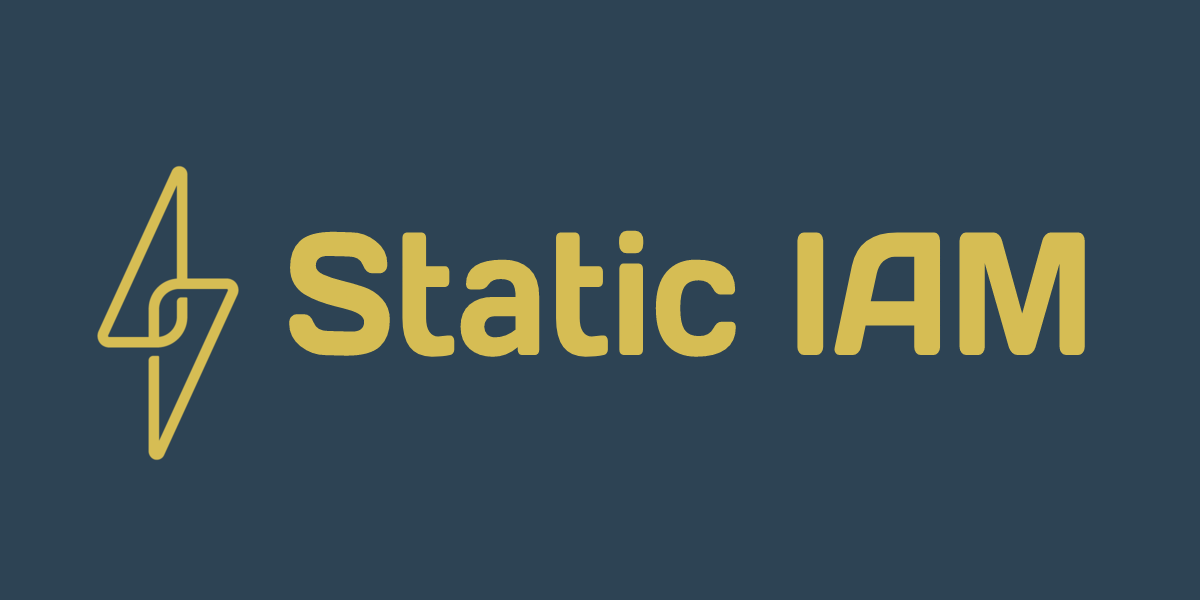
<style>
.page{position:relative;width:1200px;height:600px;background:#2d4354}
.page>*{position:absolute;margin:0}
.t1{font:175px "DaysOne-Regular";color:#d6bd54;scale:0.8 1}
</style>
<div class="page">
<p class="t1" style="left:289px;top:230px;width:796px;height:127px">Static IAM</p>
</div>
